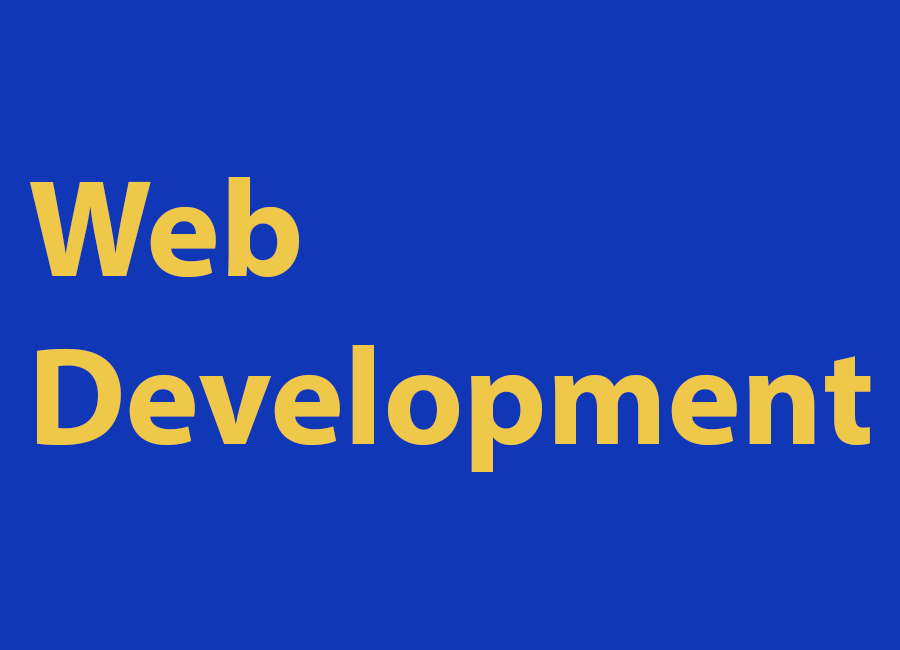
<style>
.page{position:relative;width:900px;height:650px;background:#1037b5}
.page>*{position:absolute;margin:0}
.t1{font:140px "MyriadPro-Bold";color:#efc84a}
</style>
<div class="page">
<p class="t1" style="left:30px;top:177px;width:841px;height:295px">Web<br>Development</p>
</div>
